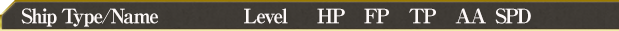
<style>
.page{position:relative;width:619px;height:31px}
.page>*{position:absolute;margin:0}
.t1{font:20px "RyuminPro-ExBold";letter-spacing:-0.08em;color:#fef9f8}
</style>
<div class="page">
<p class="t1" style="left:21px;top:8px;width:510px;height:19px">Ship Type/Name                 Level      HP    FP    TP    AA  SPD</p>
</div>
